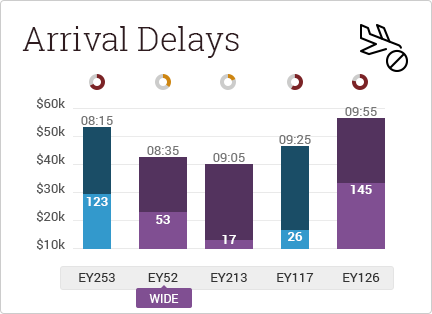
<style>
.page{position:relative;width:432px;height:314px;background:#ffffff}
.page>*{position:absolute;margin:0}
.t1{font:33px "RobotoSlab-Light";color:#2f1b1f}
.t2{font:13px "Roboto-Regular";color:#555555}
.t3{font:13px "Roboto-Regular";color:#767676}
.t4{font:13px "Roboto-Bold";color:#ffffff}
.t5{font:13px "Roboto-Regular";color:#333333}
.t6{font:12px "Roboto-Regular";color:#ffffff}
</style>
<div class="page">
<p class="t1" style="left:22px;top:26px;width:217px;height:32px">Arrival Delays</p>
<p class="t2" style="left:36px;top:97px;width:29px;height:12px">$60k</p>
<p class="t3" style="left:345px;top:107px;width:32px;height:9px">09:55</p>
<p class="t2" style="left:36px;top:125px;width:29px;height:12px">$50k</p>
<p class="t3" style="left:81px;top:116px;width:32px;height:9px">08:15</p>
<p class="t3" style="left:279px;top:135px;width:32px;height:9px">09:25</p>
<p class="t3" style="left:147px;top:146px;width:32px;height:9px">08:35</p>
<p class="t2" style="left:36px;top:153px;width:29px;height:12px">$40k</p>
<p class="t3" style="left:213px;top:153px;width:32px;height:9px">09:05</p>
<p class="t2" style="left:36px;top:182px;width:29px;height:12px">$30k</p>
<p class="t4" style="left:350px;top:185px;width:22px;height:9px">145</p>
<p class="t4" style="left:86px;top:197px;width:22px;height:9px">123</p>
<p class="t2" style="left:36px;top:210px;width:29px;height:12px">$20k</p>
<p class="t4" style="left:156px;top:215px;width:14px;height:9px">53</p>
<p class="t4" style="left:288px;top:232px;width:15px;height:9px">26</p>
<p class="t2" style="left:36px;top:238px;width:29px;height:12px">$10k</p>
<p class="t4" style="left:222px;top:235px;width:14px;height:9px">17</p>
<p class="t5" style="left:79px;top:273px;width:36px;height:9px">EY253</p>
<p class="t5" style="left:148px;top:273px;width:30px;height:9px">EY52</p>
<p class="t5" style="left:211px;top:273px;width:36px;height:9px">EY213</p>
<p class="t5" style="left:277px;top:273px;width:37px;height:9px">EY117</p>
<p class="t5" style="left:343px;top:273px;width:37px;height:9px">EY126</p>
<p class="t6" style="left:149px;top:294px;width:30px;height:9px">WIDE</p>
</div>
